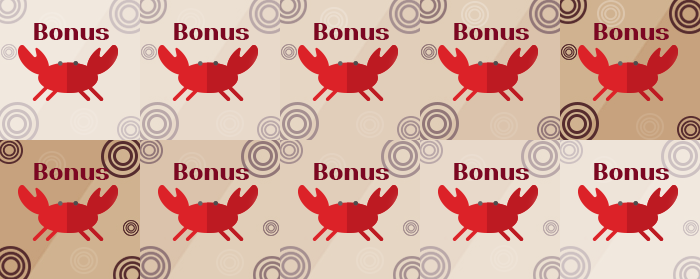
<style>
.page{position:relative;width:700px;height:279px}
.page>*{position:absolute;margin:0}
.t1{font:24px "PassionSansPDam-Heavy";color:#7d0723}
</style>
<div class="page">
<p class="t1" style="left:34px;top:23px;width:75px;height:17px">Bonus</p>
<p class="t1" style="left:174px;top:23px;width:75px;height:17px">Bonus</p>
<p class="t1" style="left:314px;top:23px;width:75px;height:17px">Bonus</p>
<p class="t1" style="left:454px;top:23px;width:75px;height:17px">Bonus</p>
<p class="t1" style="left:594px;top:23px;width:75px;height:17px">Bonus</p>
<p class="t1" style="left:34px;top:163px;width:75px;height:17px">Bonus</p>
<p class="t1" style="left:174px;top:163px;width:75px;height:17px">Bonus</p>
<p class="t1" style="left:314px;top:163px;width:75px;height:17px">Bonus</p>
<p class="t1" style="left:454px;top:163px;width:75px;height:17px">Bonus</p>
<p class="t1" style="left:594px;top:163px;width:75px;height:17px">Bonus</p>
</div>
